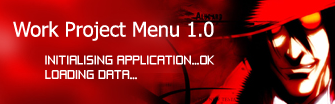
<style>
.page{position:relative;width:335px;height:104px}
.page>*{position:absolute;margin:0}
.t1{font:20px "Tahoma";color:#ffffff}
.t2{font:12px "ZeroThrees";color:#ffffff}
</style>
<div class="page">
<p class="t1" style="left:13px;top:21px;width:201px;height:20px">Work Project Menu 1.0</p>
<p class="t2" style="left:45px;top:55px;width:170px;height:25px">INITIALISING APPLICATION...OK<br>LOADING DATA...</p>
</div>
